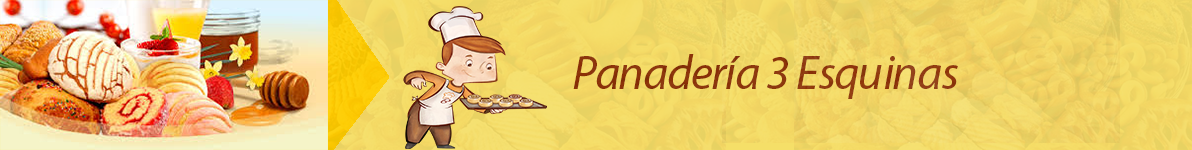
<style>
.page{position:relative;width:1192px;height:150px}
.page>*{position:absolute;margin:0}
.t1{font:48px "MyriadPro-It";letter-spacing:-0.025em;color:#872f06}
</style>
<div class="page">
<p class="t1" style="left:573px;top:54px;width:385px;height:45px">Panadería 3 Esquinas</p>
</div>
